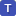
<style>
.page{position:relative;width:16px;height:16px;background:#3f51b5}
.page>*{position:absolute;margin:0}
.t1{font:12.3px "Ubuntu";letter-spacing:0.02em;color:#ffffff}
</style>
<div class="page">
<p class="t1" style="left:4px;top:4px;width:8px;height:8px">T</p>
</div>
